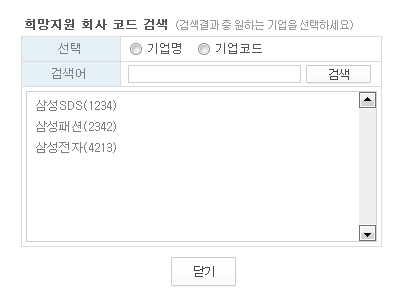
<style>
.page{position:relative;width:400px;height:300px;background:#ffffff}
.page>*{position:absolute;margin:0}
.t1{font:12px "Dotum";color:#555555;font-weight:bold}
.t2{font:11px "Dotum";letter-spacing:-0.1em;color:#999999}
.t3{font:12px "Dotum";color:#7d7d7d}
.t4{font:12px "Dotum";color:#555555}
.t5{font:12px "Dotum";letter-spacing:-0.1em;color:#454545}
</style>
<div class="page">
<p class="t1" style="left:25px;top:19px;width:142px;height:11px">희망지원 회사 코드 검색</p>
<p class="t2" style="left:176px;top:20px;width:177px;height:10px">(검색결과 중 원하는 기업을 선택하세요)</p>
<p class="t3" style="left:58px;top:43px;width:22px;height:11px">선택</p>
<p class="t4" style="left:148px;top:43px;width:33px;height:11px">기업명</p>
<p class="t4" style="left:216px;top:43px;width:46px;height:11px">기업코드</p>
<p class="t3" style="left:52px;top:68px;width:33px;height:11px">검색어</p>
<p class="t5" style="left:329px;top:69px;width:20px;height:11px">검색</p>
<p class="t3" style="left:36px;top:100px;width:80px;height:53px">삼성SDS(1234)<br>삼성패션(2342)<br>삼성전자(4213)</p>
<p class="t5" style="left:194px;top:266px;width:20px;height:11px">닫기</p>
</div>
